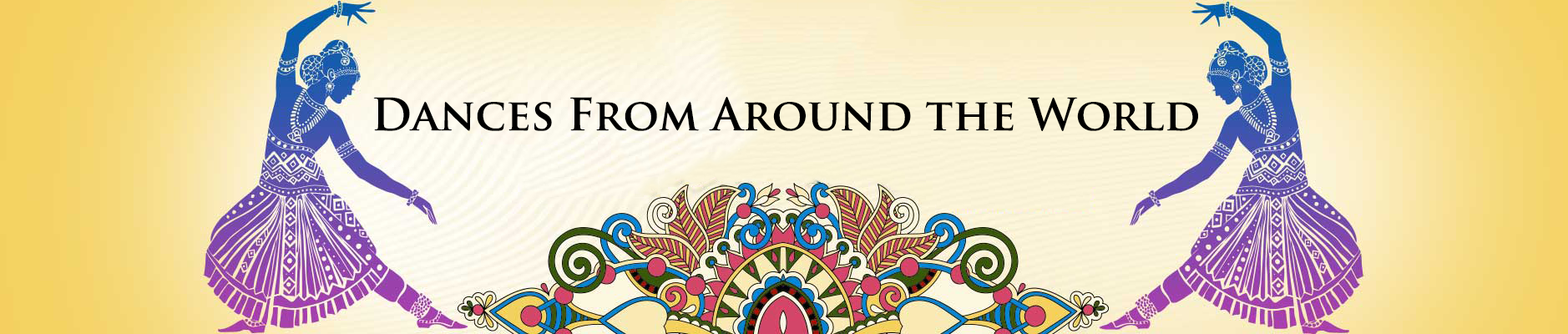
<style>
.page{position:relative;width:1568px;height:334px}
.page>*{position:absolute;margin:0}
.t1{font:43.4px "TrajanPro-Bold";color:#000000}
</style>
<div class="page">
<p class="t1" style="left:373px;top:97px;width:825px;height:34px">Dances From Around the World</p>
</div>
